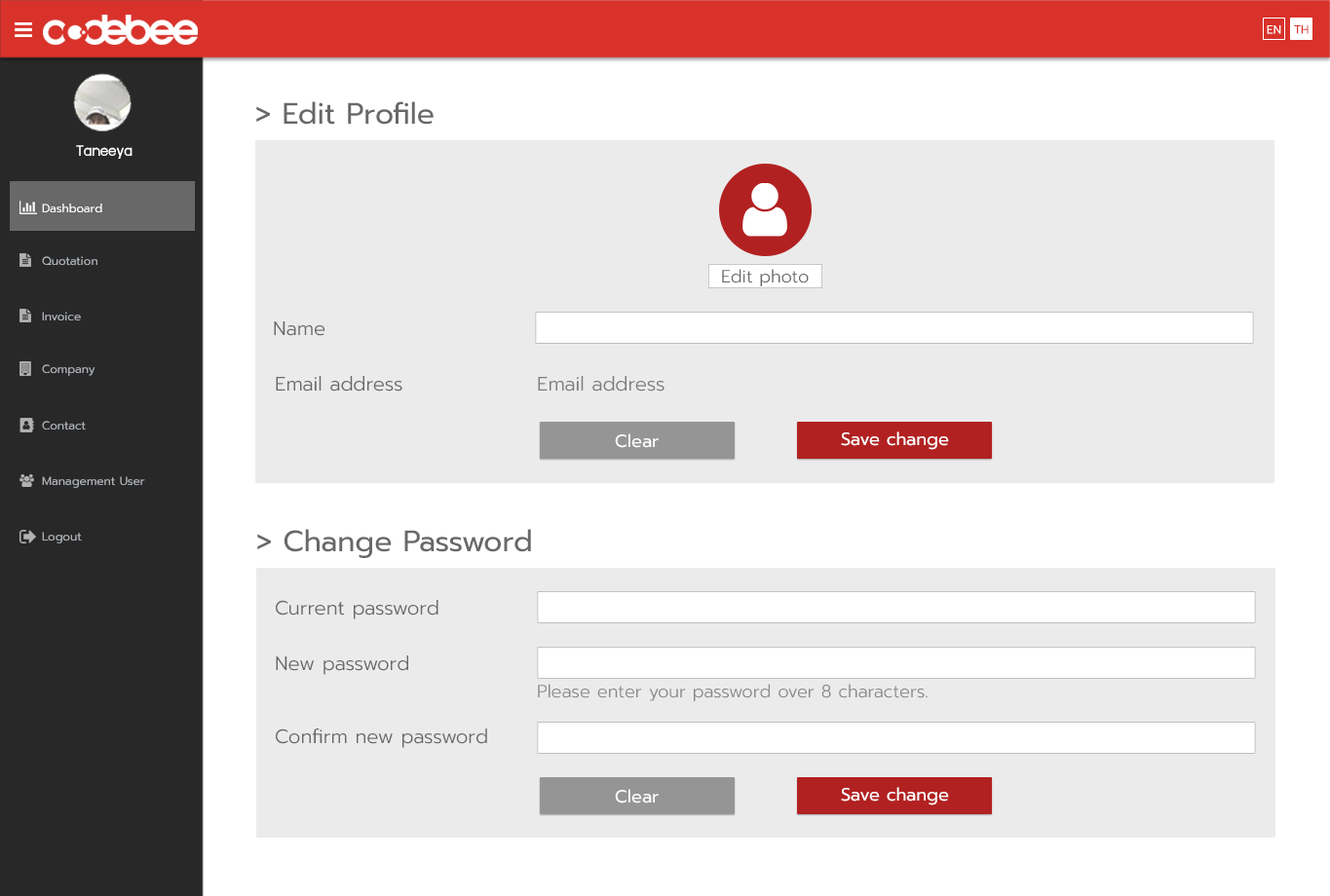
<style>
.page{position:relative;width:1330px;height:896px;background:#ebebeb}
.page>*{position:absolute;margin:0}
.t1{font:11.7px "Prompt-Regular";color:#ffffff}
.t2{font:11.7px "Prompt-Regular";color:#d8322b}
.t3{font:29.2px "Prompt-Regular";color:#686868}
.t4{font:17.5px "supermarket";color:#ffffff}
.t5{font:11.7px "Prompt-Regular";color:#aeb2b7}
.t6{font:17.5px "Prompt-Light";color:#686868}
.t7{font:19.5px "Prompt-Light";color:#686868}
.t8{font:19.5px "Prompt-Light";color:#797979}
.t9{font:17.5px "Prompt-Regular";color:#ffffff}
.t10{font:17.5px "Prompt-Light";color:#8a8787}
</style>
<div class="page">
<p class="t1" style="left:1267px;top:25px;width:14px;height:9px">EN</p>
<p class="t2" style="left:1294px;top:25px;width:15px;height:9px">TH</p>
<p class="t3" style="left:256px;top:101px;width:178px;height:24px">&gt; Edit Profile</p>
<p class="t4" style="left:76px;top:145px;width:57px;height:14px">Taneeya</p>
<p class="t1" style="left:42px;top:204px;width:60px;height:9px">Dashboard</p>
<p class="t5" style="left:42px;top:256px;width:55px;height:10px">Quotation</p>
<p class="t6" style="left:722px;top:269px;width:87px;height:17px">Edit photo</p>
<p class="t5" style="left:42px;top:312px;width:39px;height:10px">Invoice</p>
<p class="t7" style="left:274px;top:322px;width:51px;height:14px">Name</p>
<p class="t5" style="left:42px;top:364px;width:53px;height:12px">Company</p>
<p class="t7" style="left:276px;top:376px;width:126px;height:16px">Email address</p>
<p class="t8" style="left:538px;top:376px;width:127px;height:16px">Email address</p>
<p class="t5" style="left:42px;top:421px;width:44px;height:10px">Contact</p>
<p class="t9" style="left:615px;top:434px;width:44px;height:14px">Clear</p>
<p class="t9" style="left:841px;top:432px;width:108px;height:18px">Save change</p>
<p class="t5" style="left:42px;top:477px;width:103px;height:11px">Management User</p>
<p class="t5" style="left:42px;top:532px;width:40px;height:12px">Logout</p>
<p class="t3" style="left:257px;top:529px;width:274px;height:29px">&gt; Change Password</p>
<p class="t7" style="left:276px;top:600px;width:162px;height:20px">Current password</p>
<p class="t7" style="left:276px;top:656px;width:132px;height:19px">New password</p>
<p class="t10" style="left:538px;top:684px;width:390px;height:18px">Please enter your password over 8 characters.</p>
<p class="t7" style="left:276px;top:729px;width:211px;height:19px">Confirm new password</p>
<p class="t9" style="left:615px;top:789px;width:44px;height:15px">Clear</p>
<p class="t9" style="left:841px;top:787px;width:108px;height:19px">Save change</p>
</div>
